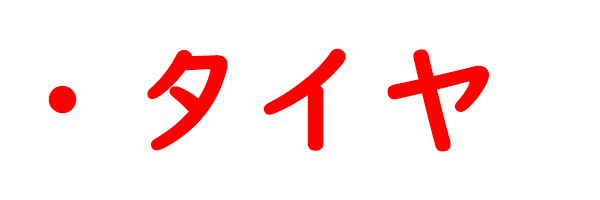
<style>
.page{position:relative;width:600px;height:200px;background:#ffffff}
.page>*{position:absolute;margin:0}
.t1{font:125px "UDDigiKyokashoNP-B";color:#ff0000}
</style>
<div class="page">
<p class="t1" style="left:48px;top:48px;width:441px;height:104px">・タイヤ</p>
</div>
